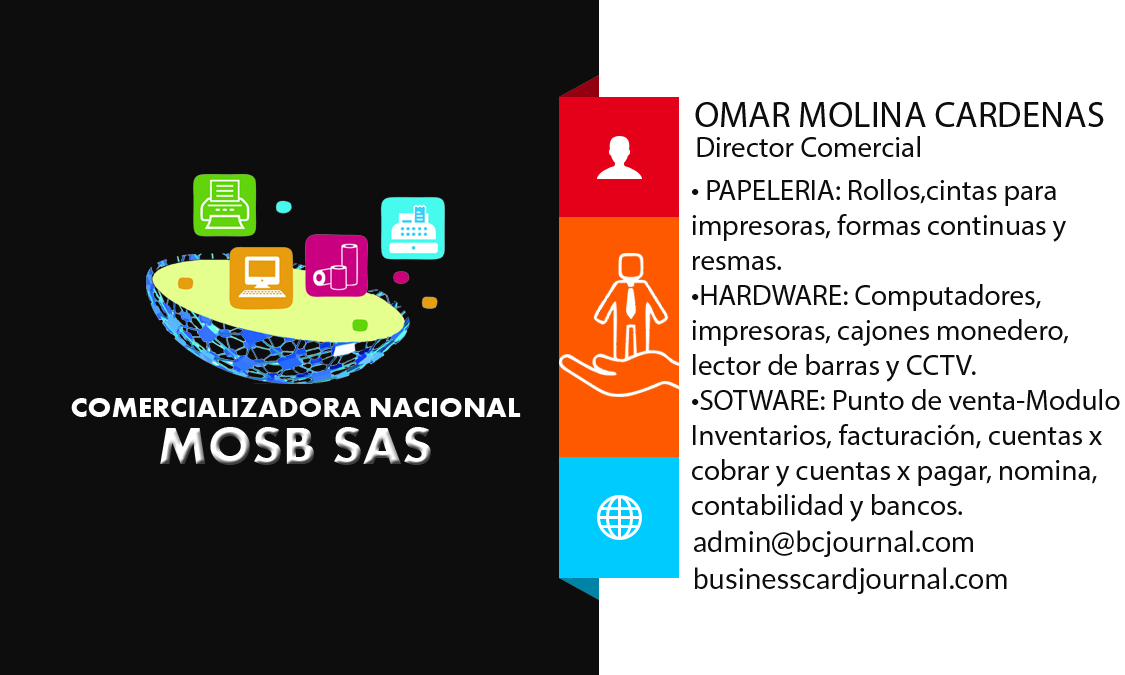
<style>
.page{position:relative;width:1125px;height:675px;background:#0d0d0d}
.page>*{position:absolute;margin:0}
.t1{font:36.7px "MyriadPro-Regular";color:#0d0d0d}
.t2{font:29.2px "MyriadPro-Regular";color:#0d0d0d}
.t3{font:29px "Aharoni-Bold";color:#ffffff}
.t4{font:54.4px "Aharoni-Bold"}
.t5{font:29.2px/37.5px "Lato-Regular";color:#0d0d0d}
</style>
<div class="page">
<p class="t1" style="left:695px;top:102px;width:409px;height:25px">OMAR MOLINA CARDENAS</p>
<p class="t2" style="left:697px;top:136px;width:223px;height:21px">Director Comercial</p>
<p class="t2" style="left:692px;top:179px;width:428px;height:343px">• PAPELERIA: Rollos,cintas para<br>impresoras, formas continuas y<br>resmas.<br>•HARDWARE: Computadores,<br>impresoras, cajones monedero,<br>lector de barras y CCTV.<br>•SOTWARE: Punto de venta-Modulo<br>Inventarios, facturación, cuentas x <br>cobrar y cuentas x pagar, nomina,<br>contabilidad y bancos.</p>
<p class="t3" style="left:71px;top:398px;width:450px;height:19px">COMERCIALIZADORA NACIONAL</p>
<p class="t4" style="left:160px;top:427px;width:271px;height:38px">MOSB SAS</p>
<p class="t5" style="left:694px;top:530px;width:313px;height:64px">admin@bcjournal.com<br>businesscardjournal.com</p>
</div>
